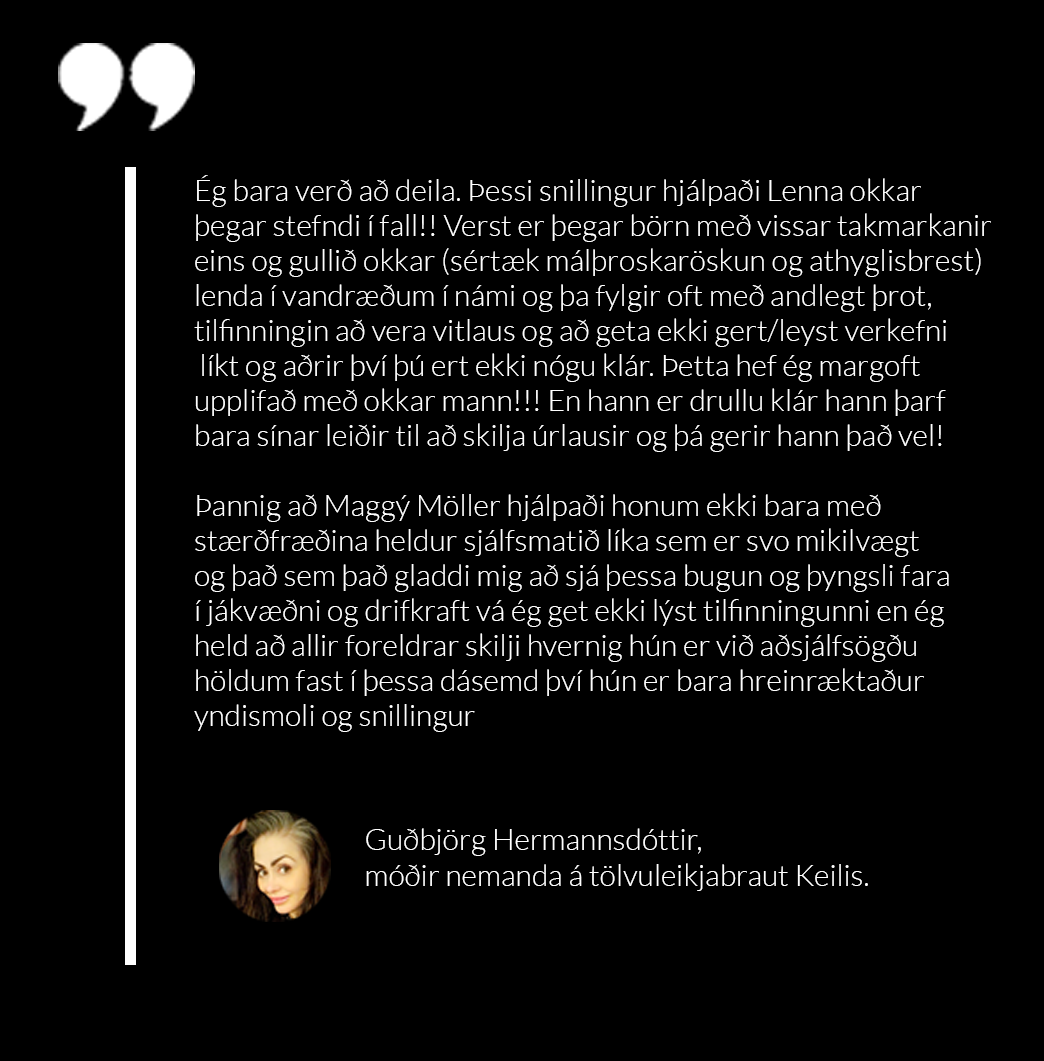
<style>
.page{position:relative;width:1044px;height:1061px;background:#000000}
.page>*{position:absolute;margin:0}
.t1{font:30px/35px "Lato-Light";color:#ffffff}
.t2{font:30px "Lato-Light";color:#ffffff}
</style>
<div class="page">
<p class="t1" style="left:194px;top:175px;width:797px;height:557px">Ég bara verð að deila. Þessi snillingur hjálpaði Lenna okkar <br>þegar stefndi í fall!! Verst er þegar börn með vissar takmarkanir <br>eins og gullið okkar (sértæk málþroskaröskun og athyglisbrest) <br>lenda í vandræðum í námi og þa fylgir oft með andlegt þrot, <br>tilfinningin að vera vitlaus og að geta ekki gert/leyst verkefni<br> líkt og aðrir því þú ert ekki nógu klár. Þetta hef ég margoft <br>upplifað með okkar mann!!! En hann er drullu klár hann þarf <br>bara sínar leiðir til að skilja úrlausir og þá gerir hann það vel! <br><br>Þannig að Maggý Möller hjálpaði honum ekki bara með <br>stærðfræðina heldur sjálfsmatið líka sem er svo mikilvægt <br>og það sem það gladdi mig að sjá þessa bugun og þyngsli fara <br>í jákvæðni og drifkraft vá ég get ekki lýst tilfinningunni en ég <br>held að allir foreldrar skilji hvernig hún er við aðsjálfsögðu <br>höldum fast í þessa dásemd því hún er bara hreinræktaður <br>yndismoli og snillingur</p>
<p class="t2" style="left:366px;top:828px;width:502px;height:63px">Guðbjörg Hermannsdóttir, <br>móðir nemanda á tölvuleikjabraut Keilis.</p>
</div>
